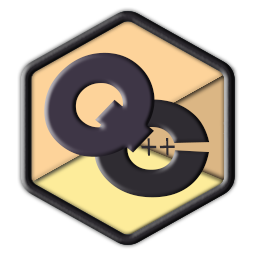
<style>
.page{position:relative;width:256px;height:256px;background:#ffffff}
.page>*{position:absolute;margin:0}
.t1{font:145.2px "Bauhaus93";color:#3e3646;scale:1.1 1}
.t2{font:139.9px "Bauhaus93";color:#2f2c32;scale:1.18 1}
.t3{font:32.7px "ScriptMTBold";color:#2f2c32;scale:0.85 1}
</style>
<div class="page">
<p class="t1" style="left:44px;top:52px;width:111px;height:105px;rotate:-46deg">Q</p>
<p class="t2" style="left:94px;top:99px;width:116px;height:99px;rotate:2deg">C</p>
<p class="t3" style="left:141px;top:138px;width:34px;height:18px;rotate:-1deg">++</p>
</div>
